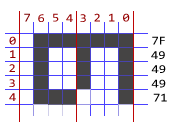
<style>
.page{position:relative;width:173px;height:133px;background:#ffffff}
.page>*{position:absolute;margin:0}
.t1{font:12px "Consolas";color:#7e0202;scale:1.1 1}
.t2{font:12px "Consolas";color:#950000;scale:1.1 1}
.t3{font:12px "Consolas";scale:1.1 1}
.t4{font:12px "Consolas";color:#000000;scale:1.1 1}
</style>
<div class="page">
<p class="t1" style="left:24px;top:13px;width:6px;height:9px">7</p>
<p class="t2" style="left:38px;top:14px;width:6px;height:8px">6</p>
<p class="t2" style="left:53px;top:13px;width:6px;height:9px">5</p>
<p class="t3" style="left:66px;top:14px;width:7px;height:8px">4</p>
<p class="t2" style="left:80px;top:14px;width:6px;height:8px">3</p>
<p class="t2" style="left:94px;top:13px;width:6px;height:9px">2</p>
<p class="t2" style="left:109px;top:13px;width:6px;height:9px">1</p>
<p class="t2" style="left:123px;top:13px;width:7px;height:9px">0</p>
<p class="t2" style="left:9px;top:36px;width:7px;height:9px">0</p>
<p class="t4" style="left:152px;top:36px;width:13px;height:9px">7F</p>
<p class="t2" style="left:10px;top:50px;width:6px;height:8px">1</p>
<p class="t4" style="left:151px;top:51px;width:14px;height:8px">49</p>
<p class="t2" style="left:9px;top:64px;width:6px;height:8px">2</p>
<p class="t4" style="left:151px;top:65px;width:15px;height:8px">49</p>
<p class="t2" style="left:9px;top:79px;width:6px;height:8px">3</p>
<p class="t4" style="left:151px;top:79px;width:15px;height:9px">49</p>
<p class="t3" style="left:9px;top:93px;width:7px;height:8px">4</p>
<p class="t4" style="left:153px;top:93px;width:14px;height:9px">71</p>
</div>
